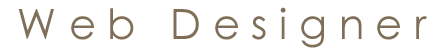
<style>
.page{position:relative;width:448px;height:55px;background:#ffffff}
.page>*{position:absolute;margin:0}
.t1{font:41.7px "CenturyGothic";color:#7f6f58}
</style>
<div class="page">
<p class="t1" style="left:18px;top:7px;width:409px;height:41px">W e b   D e s i g n e r</p>
</div>
